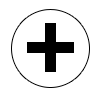
<style>
.page{position:relative;width:100px;height:100px;background:#ffffff}
.page>*{position:absolute;margin:0}
.t1{font:80.3px "Swiss721BT-Black";color:#000000}
</style>
<div class="page">
<p class="t1" style="left:27px;top:23px;width:47px;height:49px">+</p>
</div>
